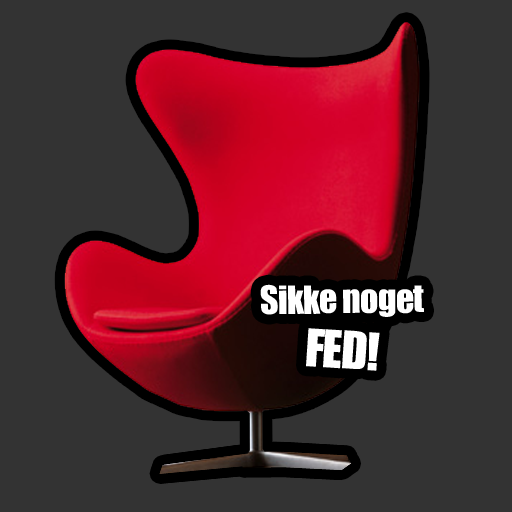
<style>
.page{position:relative;width:512px;height:512px;background:#333333}
.page>*{position:absolute;margin:0}
.t1{font:36px "Impact";letter-spacing:-0.025em;color:#ffffff}
.t2{font:48px "Impact";letter-spacing:-0.025em;color:#ffffff}
</style>
<div class="page">
<p class="t1" style="left:260px;top:284px;width:164px;height:33px;rotate:-1deg">Sikke noget</p>
<p class="t2" style="left:306px;top:328px;width:74px;height:43px;rotate:4deg">FED!</p>
</div>
